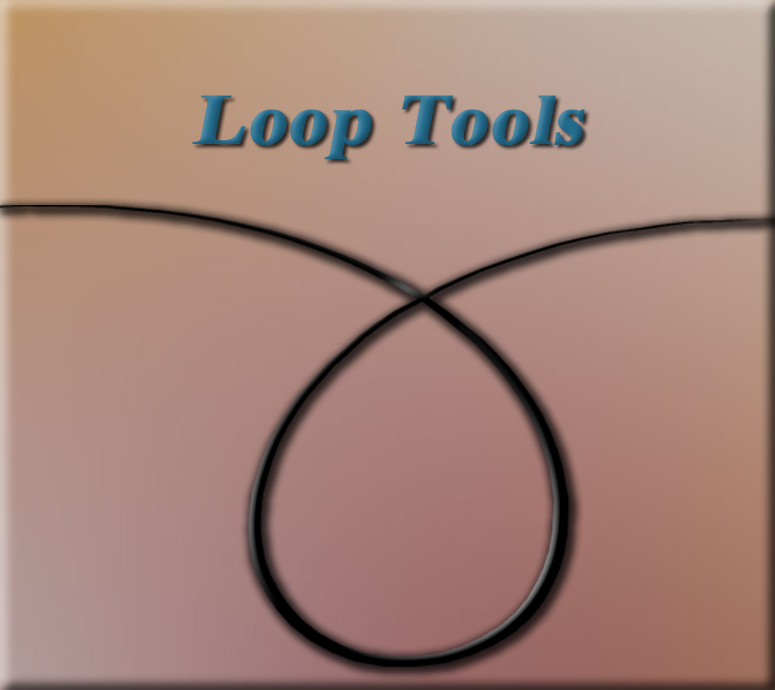
<style>
.page{position:relative;width:775px;height:690px}
.page>*{position:absolute;margin:0}
.t1{font:71.6px "TimesNewRomanPS-BoldMT";color:#236b8c;font-weight:bold;font-style:italic;scale:1.08 1}
</style>
<div class="page">
<p class="t1" style="left:192px;top:95px;width:393px;height:65px">Loop Tools</p>
</div>
